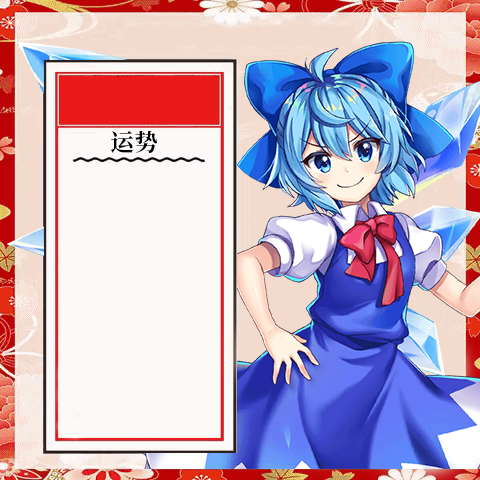
<style>
.page{position:relative;width:480px;height:480px;background:#fcfaf9}
.page>*{position:absolute;margin:0}
.t1{font:24px "NotoSerifSC-Bold";color:#000000}
</style>
<div class="page">
<p class="t1" style="left:111px;top:130px;width:46px;height:23px">运势</p>
</div>
